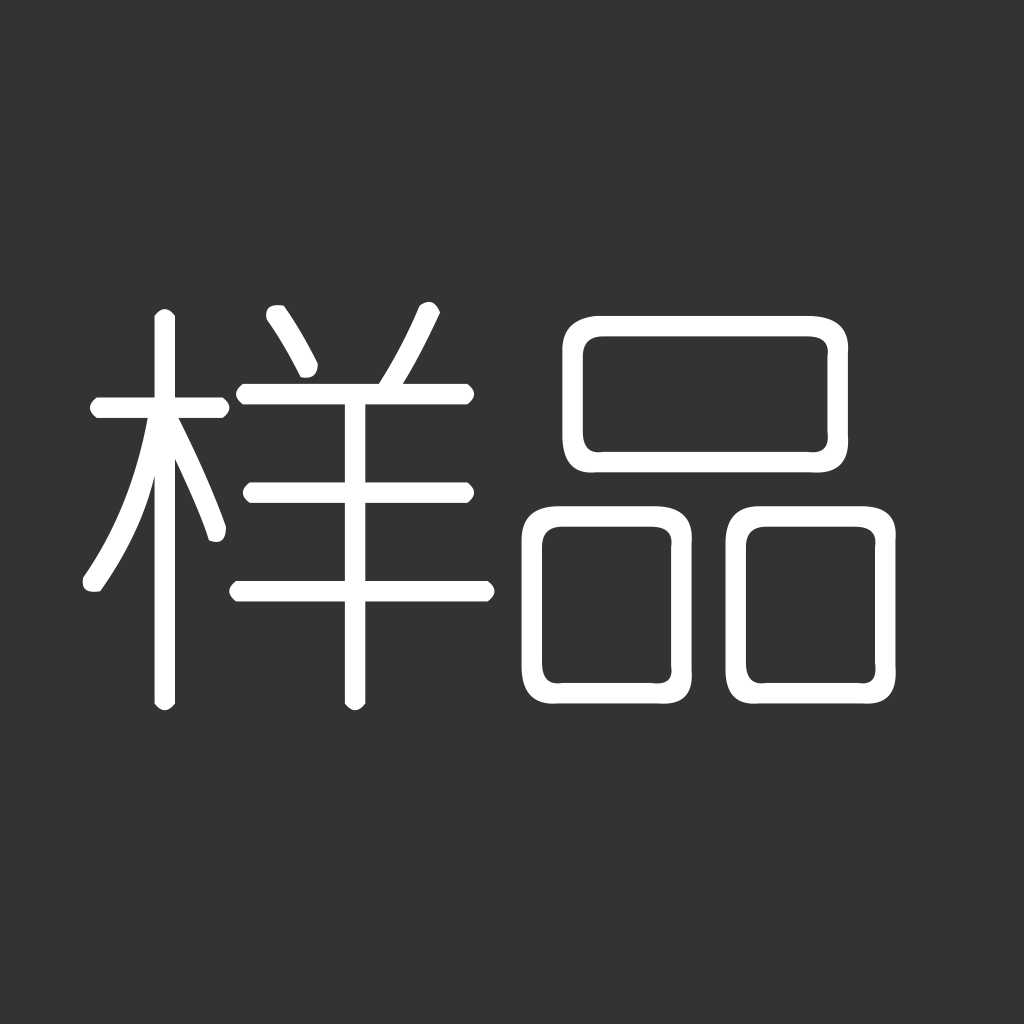
<style>
.page{position:relative;width:1024px;height:1024px;background:#333333}
.page>*{position:absolute;margin:0}
.t1{font:435px "YouYuan";letter-spacing:-0.04em;color:#ffffff}
</style>
<div class="page">
<p class="t1" style="left:82px;top:301px;width:814px;height:410px">样品</p>
</div>
